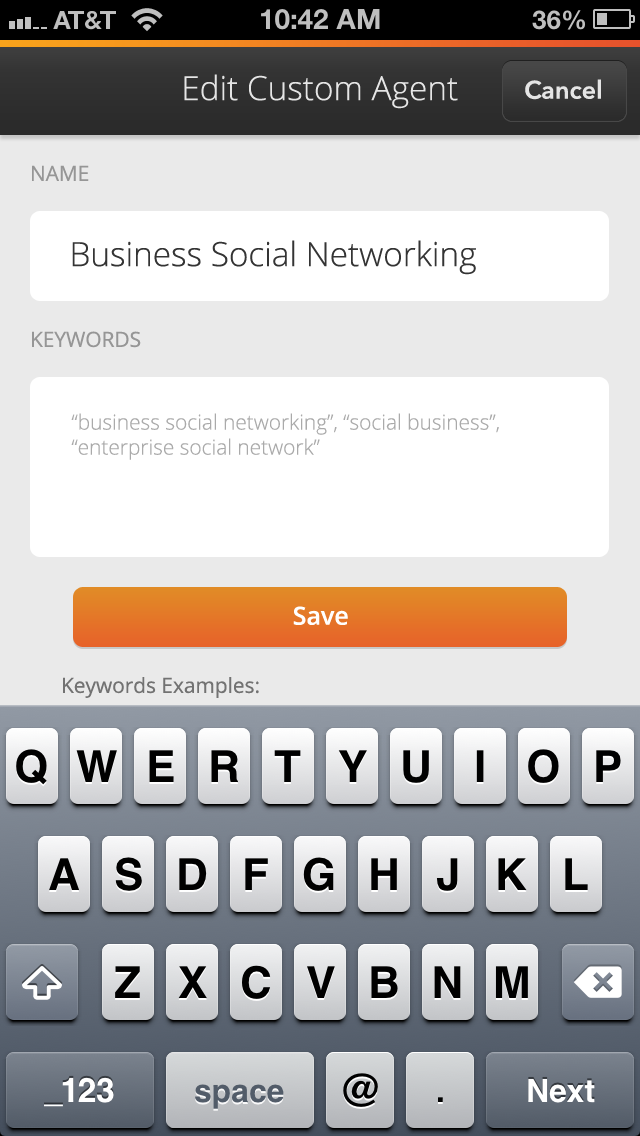
<style>
.page{position:relative;width:640px;height:1136px;background:#eaeaea}
.page>*{position:absolute;margin:0}
.t1{font:33.3px "OpenSans-Light";color:#e5e5e5}
.t2{font:25px "AvenirNext-DemiBold";color:#e5e5e5}
.t3{font:20.8px "OpenSans";color:#969696}
.t4{font:33.3px "OpenSans-Light";color:#343434}
.t5{font:20.8px "OpenSans-Light";color:#aaaaaa}
.t6{font:25px "OpenSans-Semibold";color:#ffffff}
</style>
<div class="page">
<p class="t1" style="left:184px;top:74px;width:274px;height:35px">Edit Custom Agent</p>
<p class="t2" style="left:525px;top:79px;width:76px;height:21px">Cancel</p>
<p class="t3" style="left:32px;top:165px;width:57px;height:16px">NAME</p>
<p class="t4" style="left:72px;top:240px;width:404px;height:35px">Business Social Networking</p>
<p class="t3" style="left:32px;top:331px;width:109px;height:17px">KEYWORDS</p>
<p class="t5" style="left:71px;top:413px;width:428px;height:47px">“business social networking”, “social business”, “enterprise social network”</p>
<p class="t6" style="left:293px;top:606px;width:55px;height:19px">Save</p>
</div>
